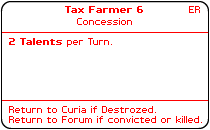
<style>
.page{position:relative;width:210px;height:130px;background:#ffffff}
.page>*{position:absolute;margin:0}
.t1{font:8px "PFTempestaSeven-Bold";color:#ff0000}
.t2{font:8px "PFTempestaSeven";color:#ff0000}
</style>
<div class="page">
<p class="t1" style="left:65px;top:6px;width:78px;height:7px">Tax Farmer 6</p>
<p class="t2" style="left:189px;top:6px;width:11px;height:7px">ER</p>
<p class="t2" style="left:77px;top:18px;width:55px;height:7px">Concession</p>
<p class="t1" style="left:9px;top:38px;width:103px;height:9px">2 Talents<span class="t2"> per Turn.</span></p>
<p class="t2" style="left:9px;top:106px;width:193px;height:17px">Return to Curia if Destrozed.<br>Return to Forum if convicted or killed.</p>
</div>
